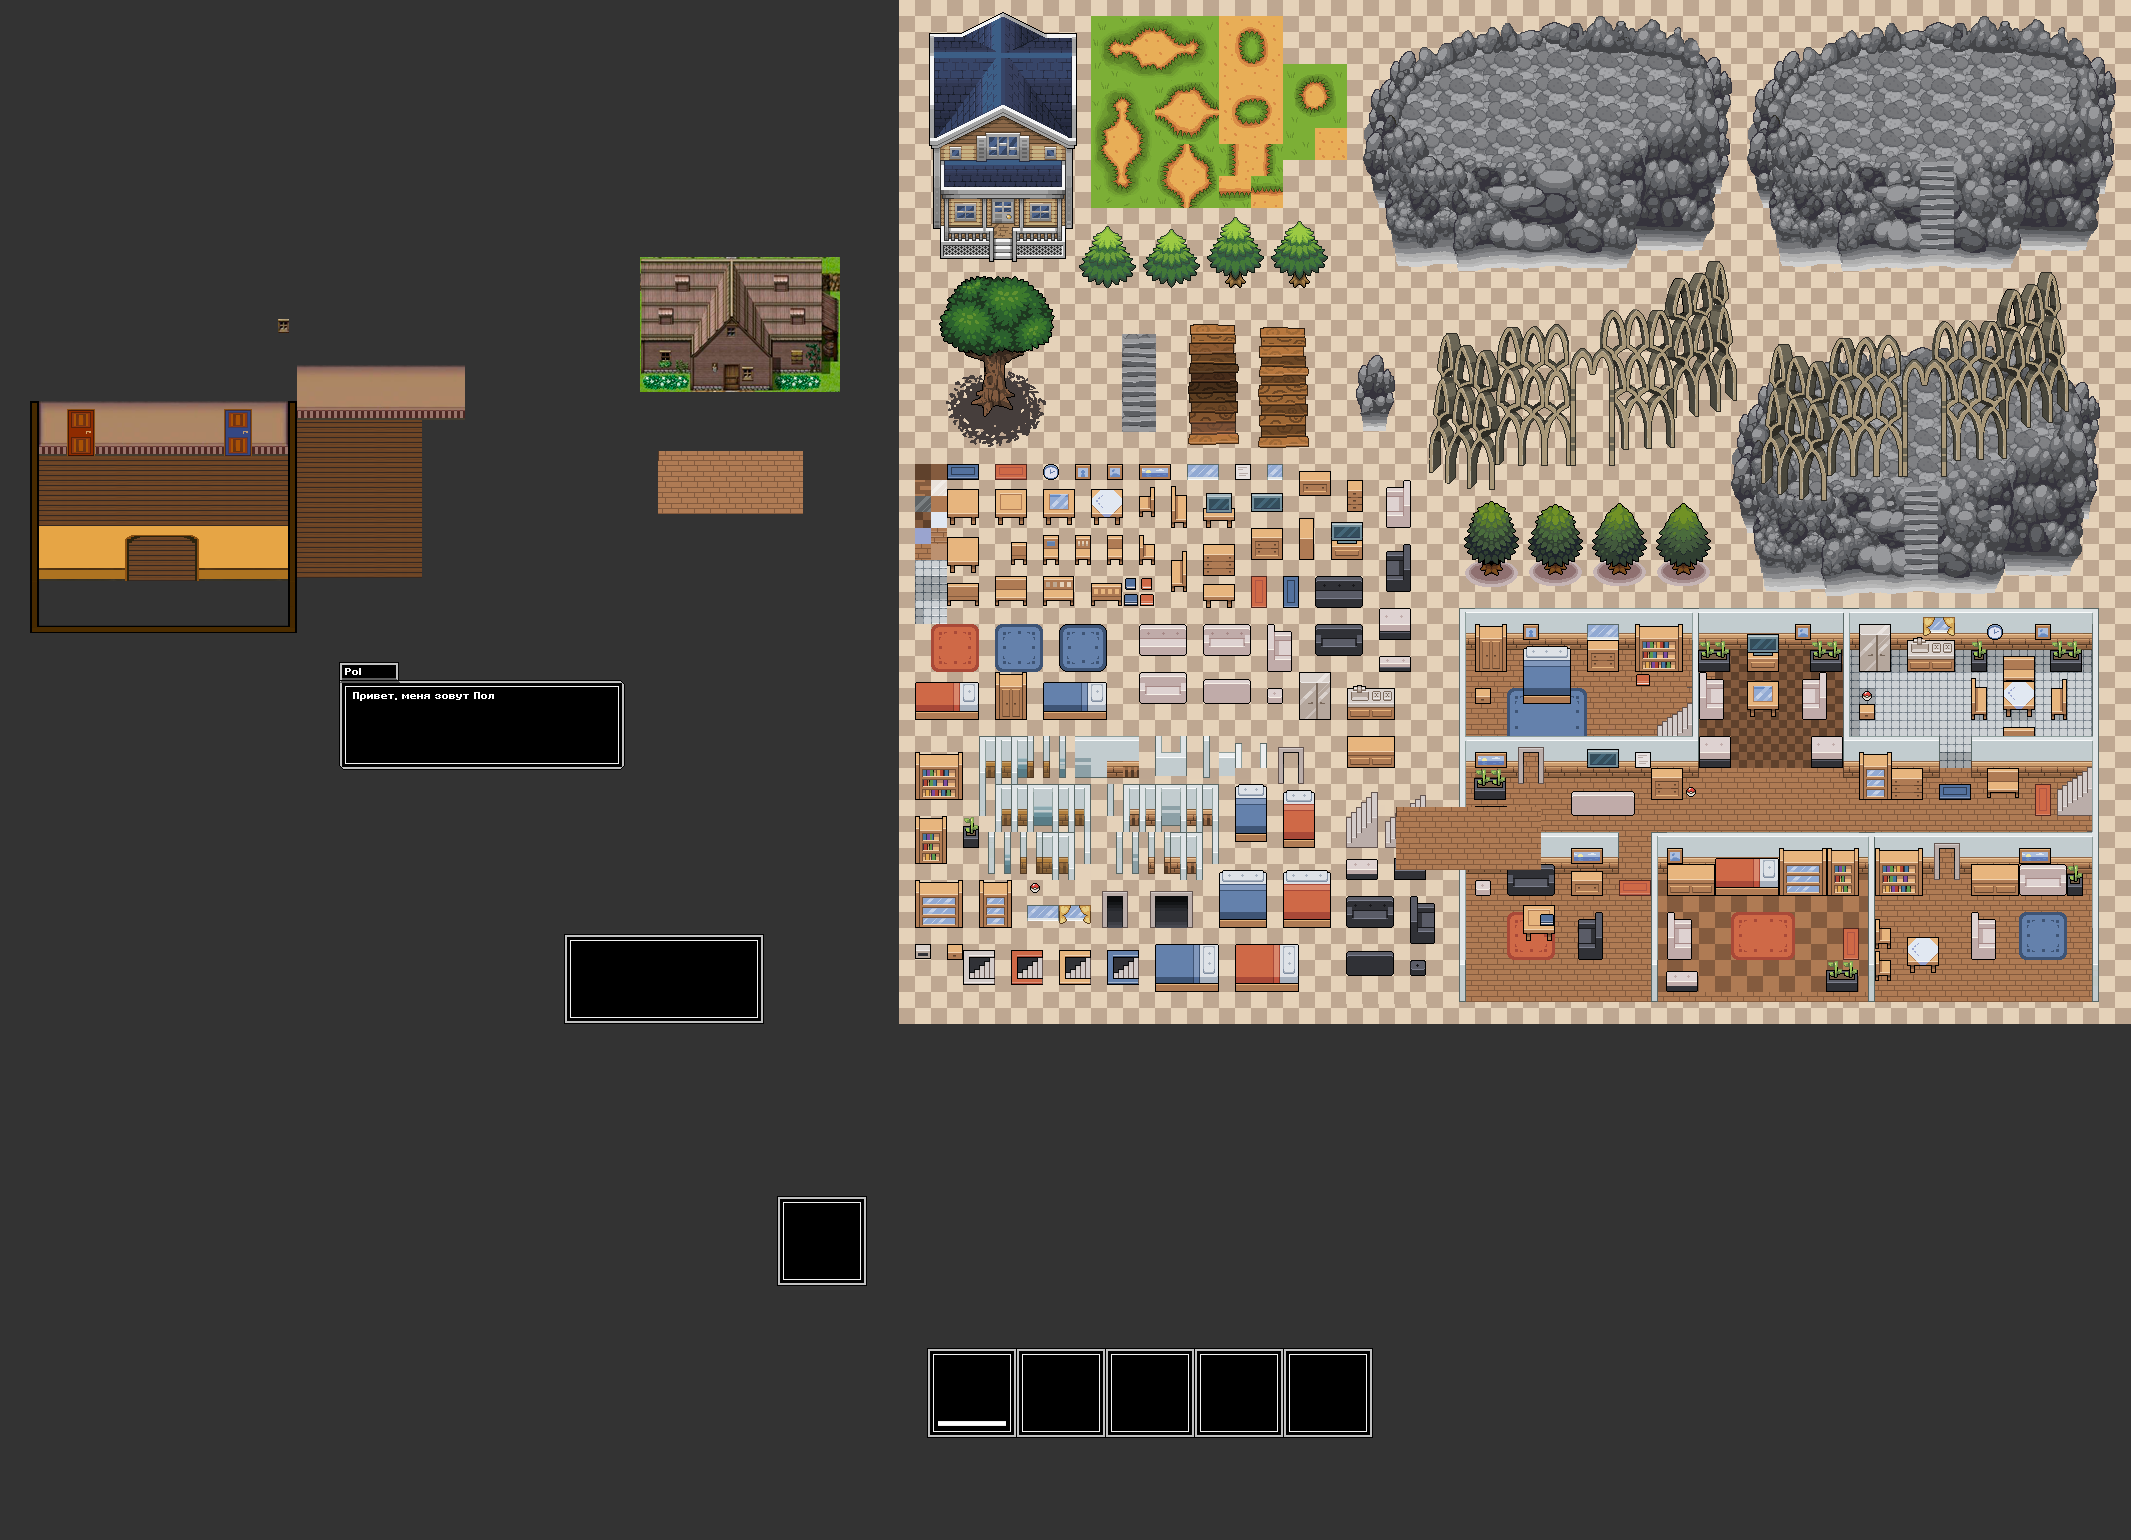
<style>
.page{position:relative;width:2131px;height:1540px;background:#333333}
.page>*{position:absolute;margin:0}
.t1{font:8.9px "PixeloidSans-Bold";letter-spacing:0.005em;color:#ffffff}
</style>
<div class="page">
<p class="t1" style="left:345px;top:668px;width:16px;height:7px">Pol</p>
<p class="t1" style="left:353px;top:692px;width:141px;height:9px">Привет, меня зовут Пол</p>
</div>
